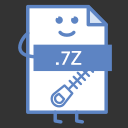
<style>
.page{position:relative;width:128px;height:128px;background:#333333}
.page>*{position:absolute;margin:0}
.t1{font:20px "MyriadPro-Regular";color:#ffffff;font-variant:small-caps}
</style>
<div class="page">
<p class="t1" style="left:61px;top:51px;width:21px;height:14px">7Z</p>
</div>
